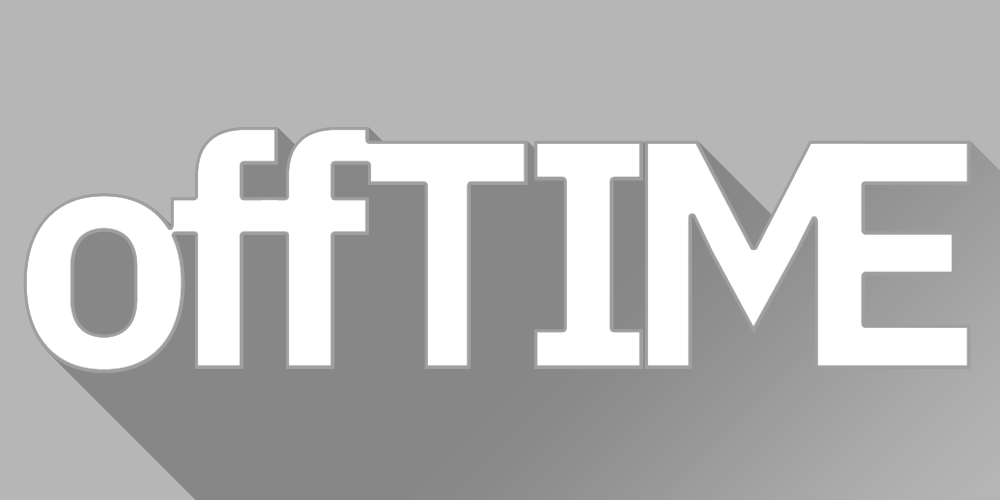
<style>
.page{position:relative;width:1000px;height:500px;background:#b6b6b6}
.page>*{position:absolute;margin:0}
.t1{font:327px "IBMPlexSansKR-Bold";letter-spacing:-0.1em;color:#ffffff}
.t2{font:327px "IBMPlexSansKR-Bold";letter-spacing:-0.08em;color:#ffffff}
.t3{font:327px "IBMPlexSansKR-Bold";letter-spacing:-0.04em;color:#ffffff}
.t4{font:327px "IBMPlexSansKR-Bold";letter-spacing:-0.06em;color:#ffffff;scale:0.92 1}
.t5{font:327px "IBMPlexSansKR-Bold";letter-spacing:-0.12em;color:#ffffff}
.t6{font:327px "IBMPlexSansKR-Bold";letter-spacing:-0.3em;color:#ffffff}
.t7{font:327px "IBMPlexSansKR-Bold";letter-spacing:-0.06em;color:#ffffff}
</style>
<div class="page">
<p class="t1" style="left:23px;top:127px;width:948px;height:246px">o<span class="t2">f</span><span class="t3">f</span><span class="t4">T</span><span class="t5">I</span><span class="t6">M</span><span class="t7">E</span></p>
</div>
